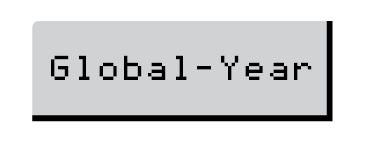
<style>
.page{position:relative;width:375px;height:142px;background:#d1d2d4}
.page>*{position:absolute;margin:0}
.t1{font:27.8px "Mono0756";color:#000000}
</style>
<div class="page">
<p class="t1" style="left:51px;top:55px;width:261px;height:25px">Global-Year</p>
</div>
